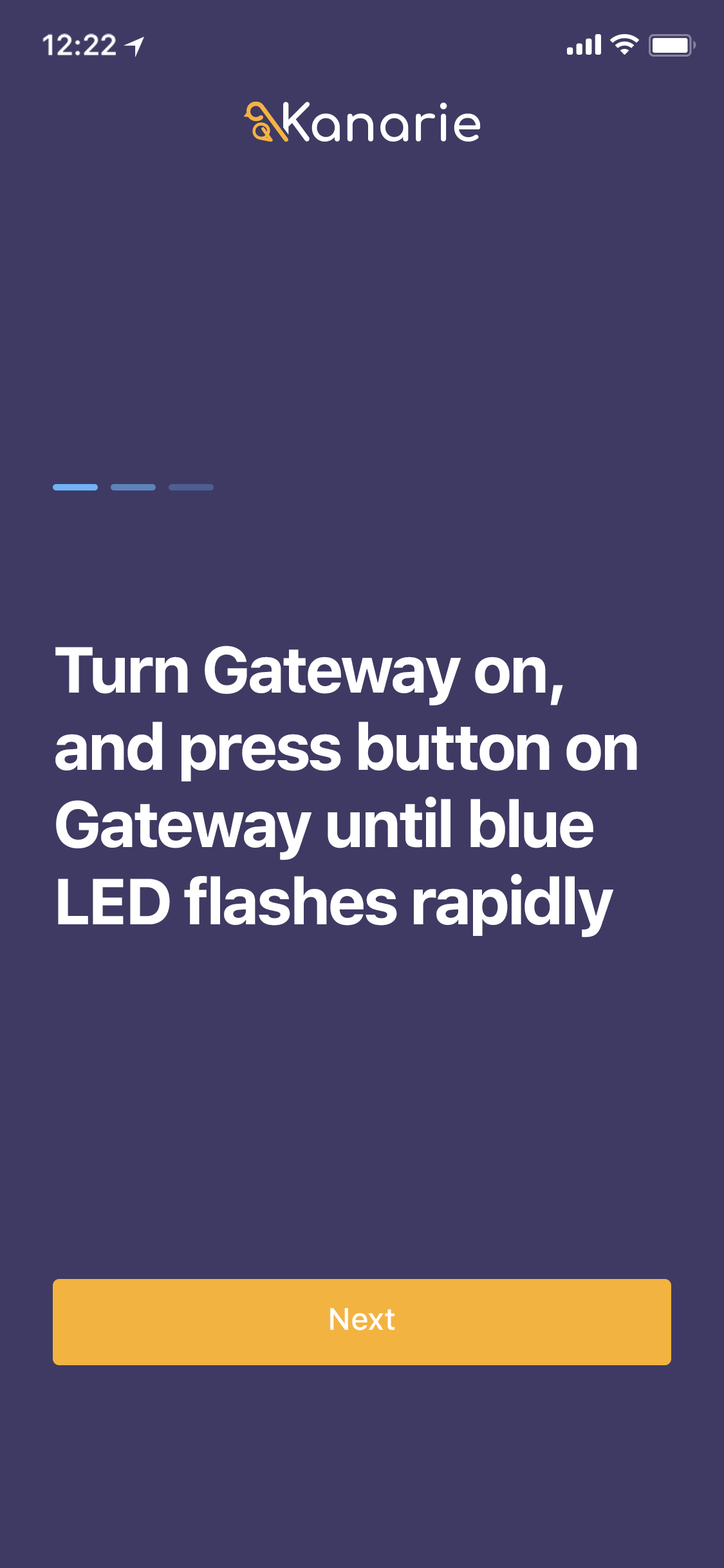
<style>
.page{position:relative;width:724px;height:1568px;background:#3e3a63}
.page>*{position:absolute;margin:0}
.t1{font:29px "SFProText-Semibold";letter-spacing:-0.02em;color:#ffffff}
.t2{font:64.4px "SFProText-Bold";letter-spacing:-0.05em;color:#ffffff}
.t3{font:30.9px "SFProText-Medium";letter-spacing:-0.01em;color:#ffffff}
</style>
<div class="page">
<p class="t1" style="left:42px;top:33px;width:74px;height:23px">12:22</p>
<p class="t2" style="left:55px;top:646px;width:582px;height:291px">Turn Gateway on, and press button on Gateway until blue LED flashes rapidly</p>
<p class="t3" style="left:330px;top:1308px;width:65px;height:22px">Next</p>
</div>
